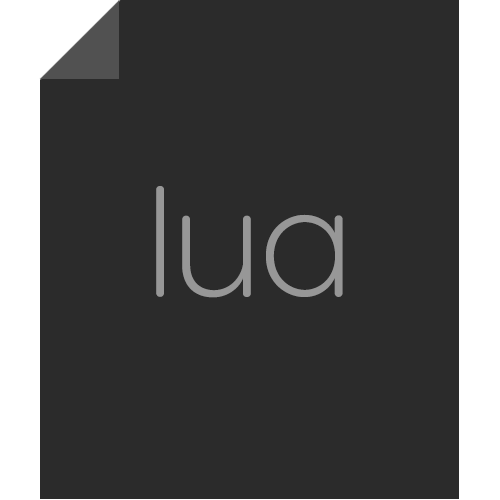
<style>
.page{position:relative;width:500px;height:500px;background:#2b2b2b}
.page>*{position:absolute;margin:0}
.t1{font:153.8px "VisbyRoundCF-Light";color:#979797}
</style>
<div class="page">
<p class="t1" style="left:156px;top:186px;width:187px;height:112px">lua</p>
</div>
